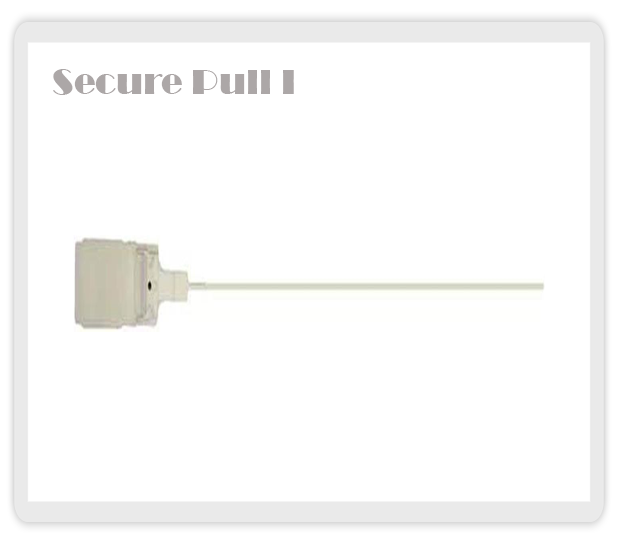
<style>
.page{position:relative;width:618px;height:544px;background:#ffffff}
.page>*{position:absolute;margin:0}
.t1{font:36px "Broadway";color:#aca7a7}
</style>
<div class="page">
<p class="t1" style="left:53px;top:69px;width:241px;height:26px">Secure Pull I</p>
</div>
